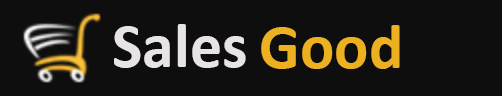
<style>
.page{position:relative;width:502px;height:96px;background:#0e0e0e}
.page>*{position:absolute;margin:0}
.t1{font:64px "Calibri-Bold";color:#e9e4e4}
.t2{font:64px "Calibri-Bold";color:#ecb021}
</style>
<div class="page">
<p class="t1" style="left:114px;top:24px;width:132px;height:44px">Sales</p>
<p class="t2" style="left:261px;top:25px;width:139px;height:44px">Good</p>
</div>
